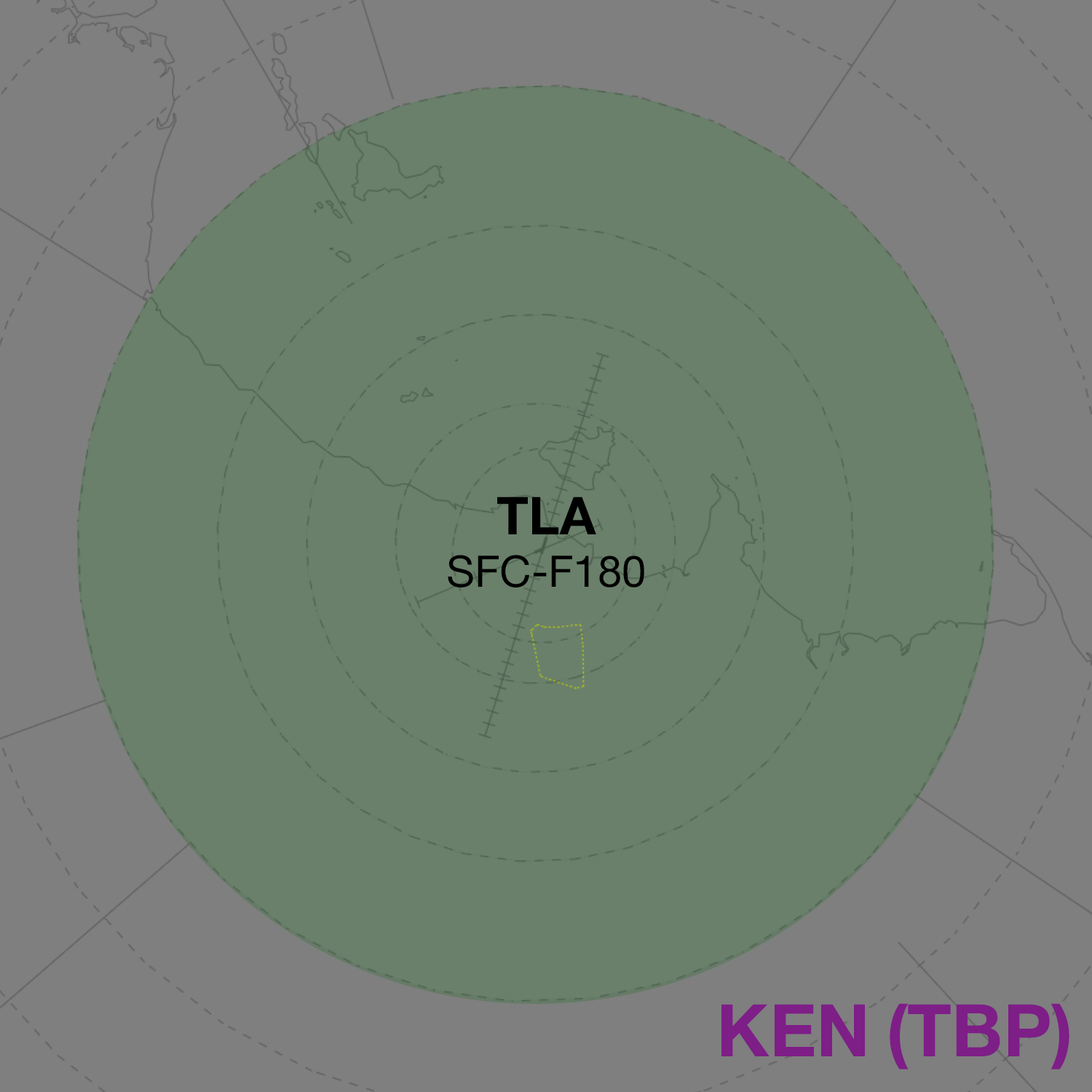
<style>
.page{position:relative;width:1092px;height:1092px;background:#6a806b}
.page>*{position:absolute;margin:0}
.t1{font:43.7px "HelveticaNeue-Roman";color:#000000}
.t2{font:52.4px "HelveticaNeue-Bold";color:#000000}
.t3{font:72.8px "HelveticaNeue-Bold";color:#7e1e87}
</style>
<div class="page">
<p class="t1" style="left:448px;top:496px;width:196px;height:91px;text-align:center"><span class="t2">TLA<br></span>SFC-F180</p>
<p class="t3" style="left:721px;top:1003px;width:348px;height:66px">KEN (TBP)</p>
</div>
